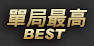
<style>
.page{position:relative;width:94px;height:46px}
.page>*{position:absolute;margin:0}
.t1{font:20px "DFNHei-XB-HKP-BF";font-style:italic}
.t2{font:14px "Arial-BlackItalic"}
</style>
<div class="page">
<p class="t1" style="left:7px;top:8px;width:81px;height:20px">單局最高</p>
<p class="t2" style="left:23px;top:28px;width:43px;height:12px">BEST</p>
</div>
